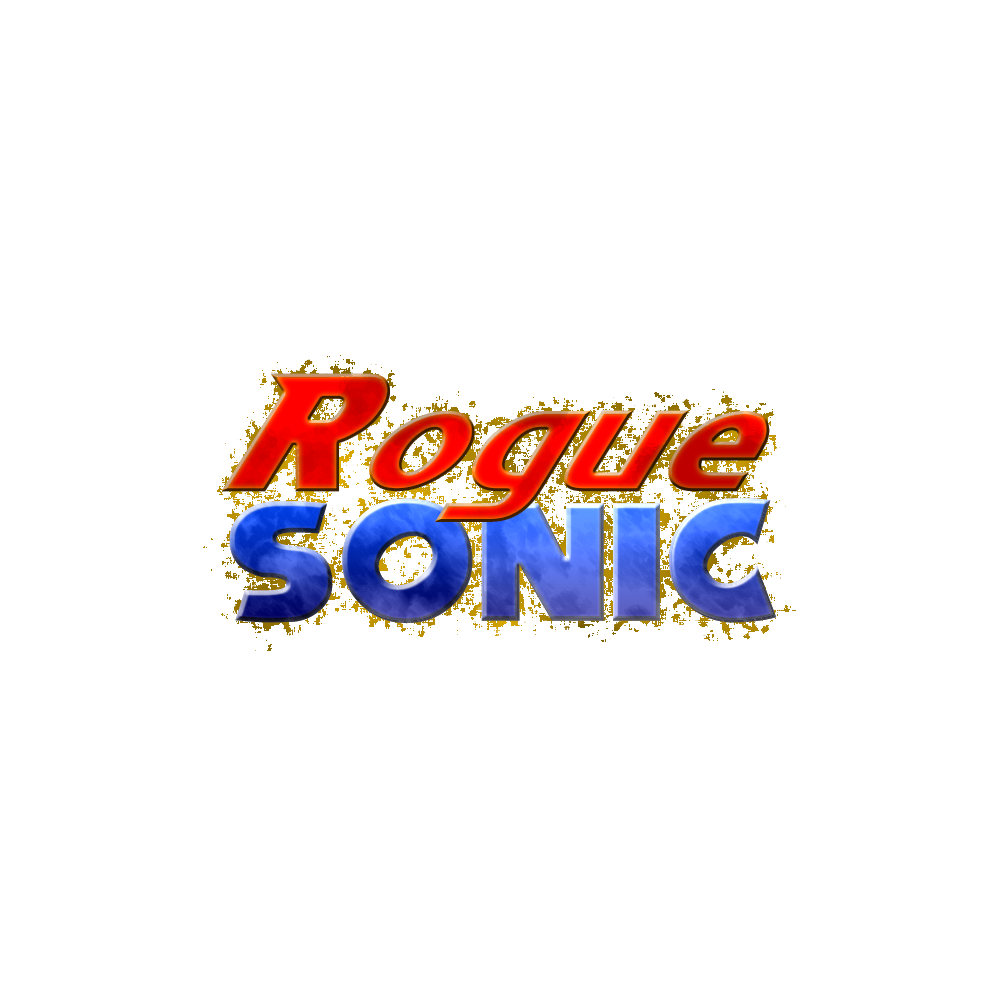
<style>
.page{position:relative;width:1000px;height:1000px;background:#ffffff}
.page>*{position:absolute;margin:0}
.t1{font:150.2px "NiseSonicBattle"}
.t2{font:150.2px "NiseSegaSonic"}
</style>
<div class="page">
<p class="t1" style="left:222px;top:373px;width:548px;height:149px">Rogue</p>
<p class="t2" style="left:229px;top:498px;width:548px;height:126px">SONIC</p>
</div>
